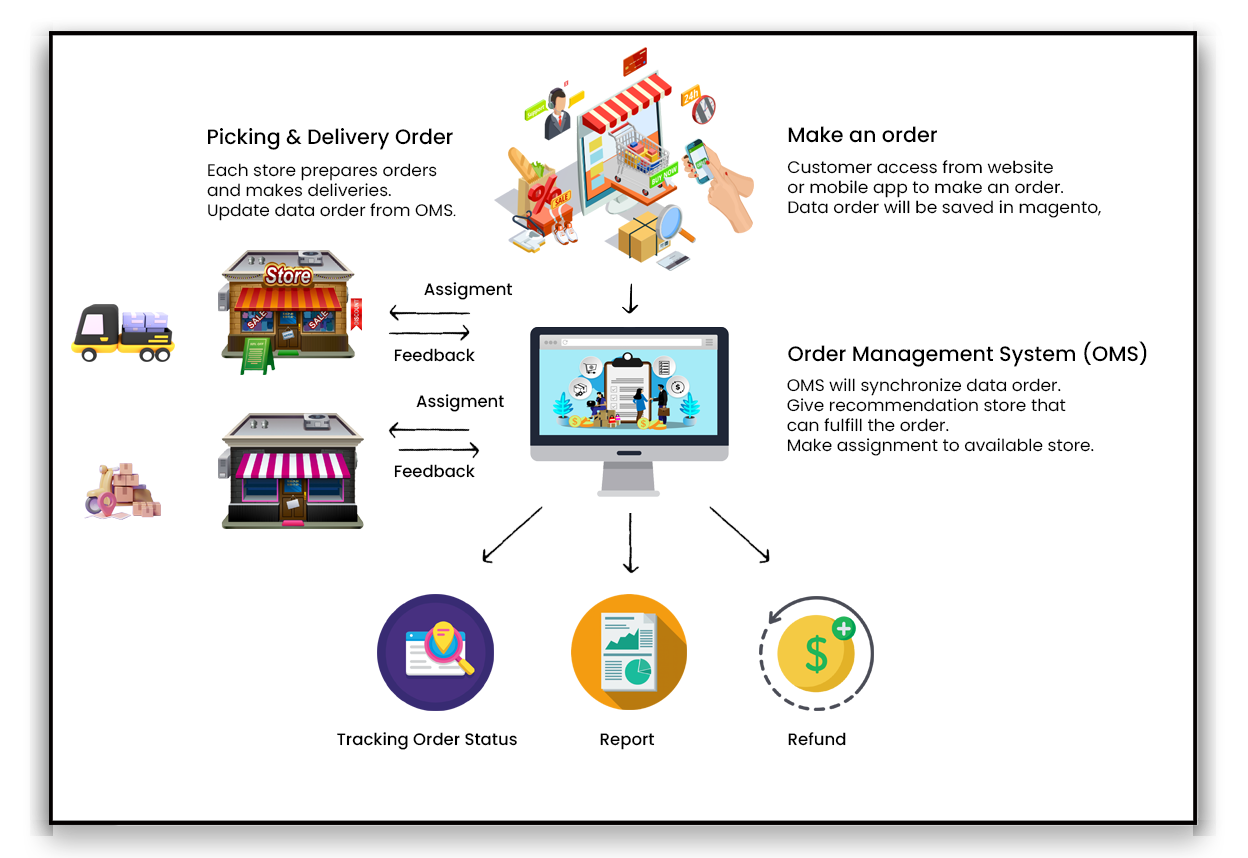
<style>
.page{position:relative;width:1248px;height:858px;background:#ffffff}
.page>*{position:absolute;margin:0}
.t1{font:20.8px "Poppins-Medium";color:#000000}
.t2{font:16.7px "Poppins-Regular";color:#000000}
.t3{font:12px "Poppins-Regular";color:#000000}
.t4{font:16.7px "Poppins-Medium";color:#000000}
</style>
<div class="page">
<p class="t1" style="left:788px;top:126px;width:149px;height:17px">Make an order</p>
<p class="t1" style="left:208px;top:128px;width:245px;height:22px">Picking &amp; Delivery Order</p>
<p class="t2" style="left:787px;top:160px;width:314px;height:58px">Customer access from website<br>or mobile app to make an order.<br>Data order will be saved in magento,</p>
<p class="t2" style="left:207px;top:163px;width:249px;height:58px">Each store prepares orders<br>and makes deliveries.<br>Update data order from OMS<span class="t3">.</span></p>
<p class="t4" style="left:424px;top:282px;width:89px;height:18px">Assigment</p>
<p class="t1" style="left:788px;top:341px;width:359px;height:26px">Order Management System (OMS)</p>
<p class="t4" style="left:394px;top:348px;width:81px;height:14px">Feedback</p>
<p class="t2" style="left:787px;top:378px;width:307px;height:78px">OMS will synchronize data order.<br>Give recommendation store that<br>can fulfill the order.<br>Make assignment to available store.</p>
<p class="t4" style="left:416px;top:394px;width:88px;height:18px">Assigment</p>
<p class="t4" style="left:394px;top:464px;width:81px;height:14px">Feedback</p>
<p class="t4" style="left:337px;top:732px;width:180px;height:18px">Tracking Order Status</p>
<p class="t4" style="left:600px;top:733px;width:55px;height:17px">Report</p>
<p class="t4" style="left:788px;top:732px;width:58px;height:14px">Refund</p>
</div>
